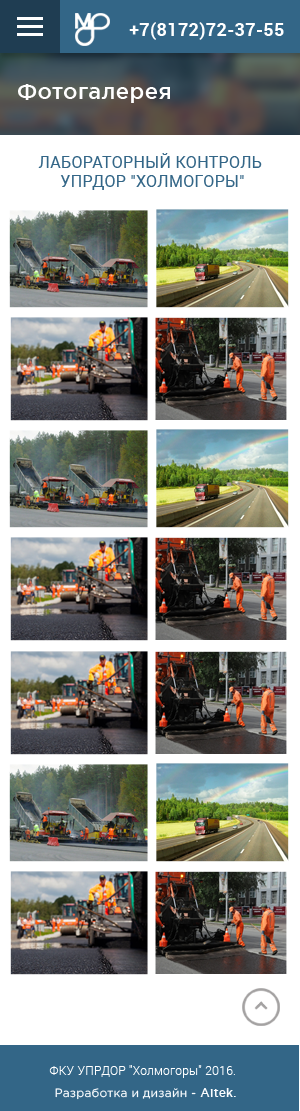
<style>
.page{position:relative;width:300px;height:1111px;background:#ffffff}
.page>*{position:absolute;margin:0}
.t1{font:18px "Roboto-Bold";letter-spacing:0.02em;color:#ffffff}
.t2{font:22px "GothamPro-Medium";letter-spacing:0.02em;color:#ffffff}
.t3{font:16px "Roboto-Regular";letter-spacing:0.02em;color:#336687;text-transform:uppercase}
.t4{font:12px "Roboto-Light";letter-spacing:0.02em;color:#ffffff}
.t5{font:12px "Roboto-Light";letter-spacing:0.02em;color:#fbfdff}
.t6{font:12px "GothamPro";letter-spacing:0.02em;color:#fbfdff}
.t7{font:12px "GothamPro-Medium";letter-spacing:0.02em;color:#fbfdff}
</style>
<div class="page">
<p class="t1" style="left:129px;top:22px;width:155px;height:18px">+7(8172)72-37-55</p>
<p class="t2" style="left:18px;top:84px;width:152px;height:19px">Фотогалерея</p>
<p class="t3" style="left:38px;top:153px;width:224px;height:37px;text-align:center">Лабораторный контроль <br>Упрдор "Холмогоры"</p>
<p class="t4" style="left:49px;top:1065px;width:186px;height:13px">ФКУ УПРДОР "Холмогоры"<span class="t5"> 2016.</span></p>
<p class="t6" style="left:55px;top:1088px;width:181px;height:12px">Разработка и дизайн - <span class="t7">Aitek.</span></p>
</div>
